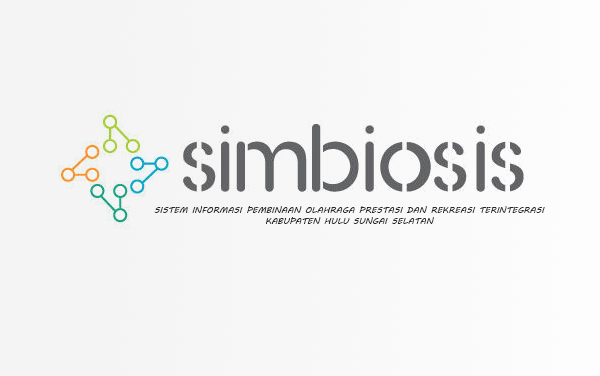
<style>
.page{position:relative;width:600px;height:376px}
.page>*{position:absolute;margin:0}
.t1{font:9px "MVBoli";color:#2c2727}
</style>
<div class="page">
<p class="t1" style="left:154px;top:206px;width:391px;height:18px;text-align:center">SISTEM INFORMASI PEMBINAAN OLAHRAGA PRESTASI DAN REKREASI TERINTEGRASI<br>KABUPATEN HULU SUNGAI SELATAN</p>
</div>
